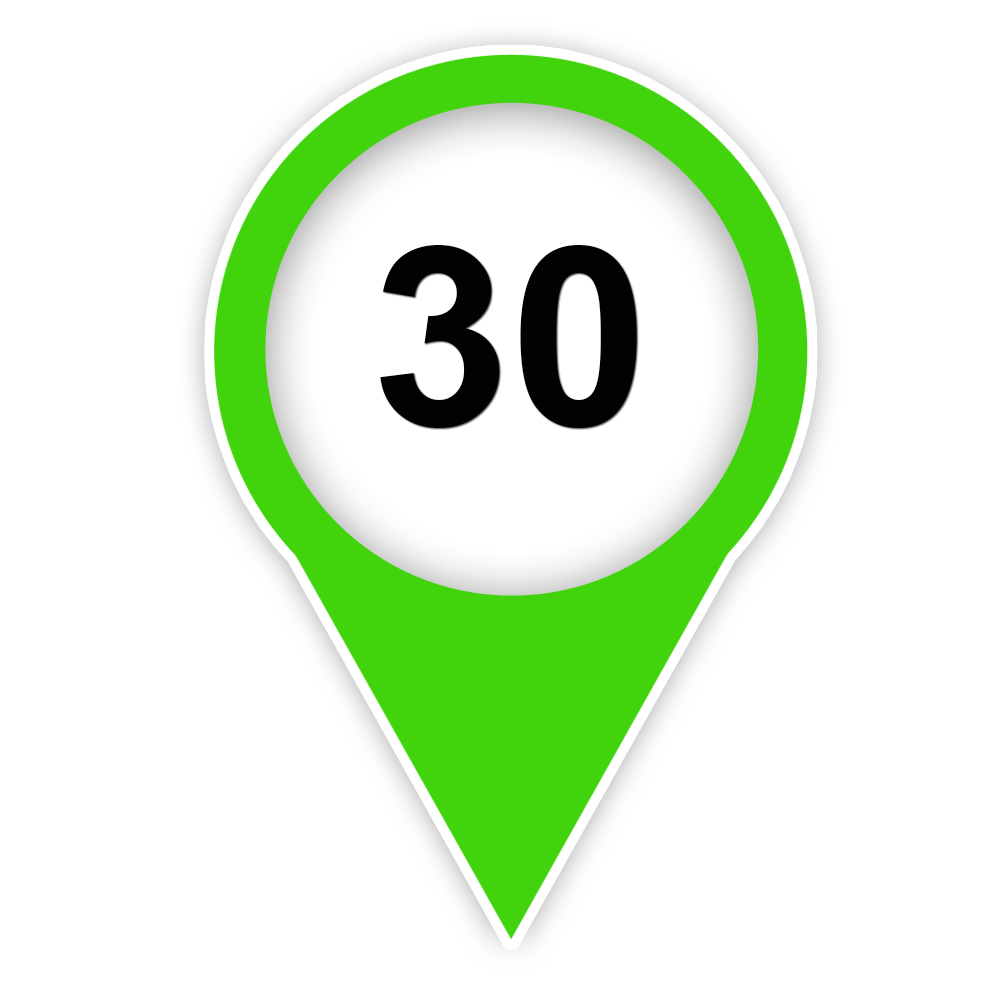
<style>
.page{position:relative;width:1000px;height:1000px;background:#ffffff}
.page>*{position:absolute;margin:0}
.t1{font:250px "Arial-BoldMT";color:#020202}
</style>
<div class="page">
<p class="t1" style="left:380px;top:245px;width:257px;height:183px">30</p>
</div>
